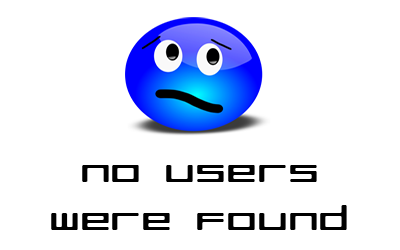
<style>
.page{position:relative;width:400px;height:250px;background:#ffffff}
.page>*{position:absolute;margin:0}
.t1{font:32px "RazerRegular";color:#000000;scale:1.5 1}
</style>
<div class="page">
<p class="t1" style="left:51px;top:165px;width:296px;height:65px;text-align:center">No users<br>were found</p>
</div>
